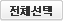
<style>
.page{position:relative;width:63px;height:21px}
.page>*{position:absolute;margin:0}
.t1{font:11px "YDIWebDotum";color:#333333;font-weight:bold}
</style>
<div class="page">
<p class="t1" style="left:10px;top:6px;width:42px;height:10px">전체선택</p>
</div>
